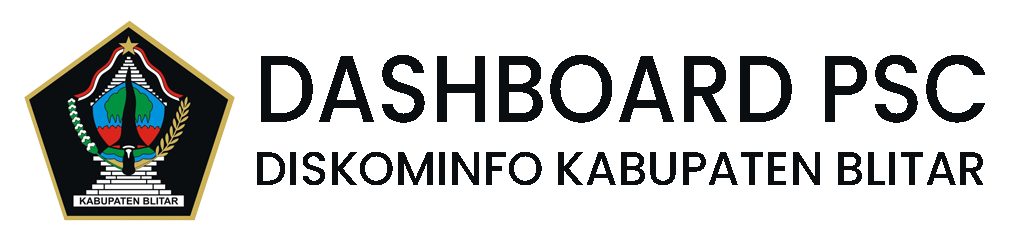
<style>
.page{position:relative;width:1024px;height:240px;background:#ffffff}
.page>*{position:absolute;margin:0}
.t1{font:95.3px "Poppins-Medium";letter-spacing:0.002em;color:#0a0e11;scale:0.92 1}
.t2{font:47.2px "Poppins-Medium";letter-spacing:0.002em;color:#0a0e11}
</style>
<div class="page">
<p class="t1" style="left:261px;top:55px;width:724px;height:68px">DASHBOARD PSC</p>
<p class="t2" style="left:257px;top:152px;width:726px;height:33px">DISKOMINFO KABUPATEN BLITAR</p>
</div>
